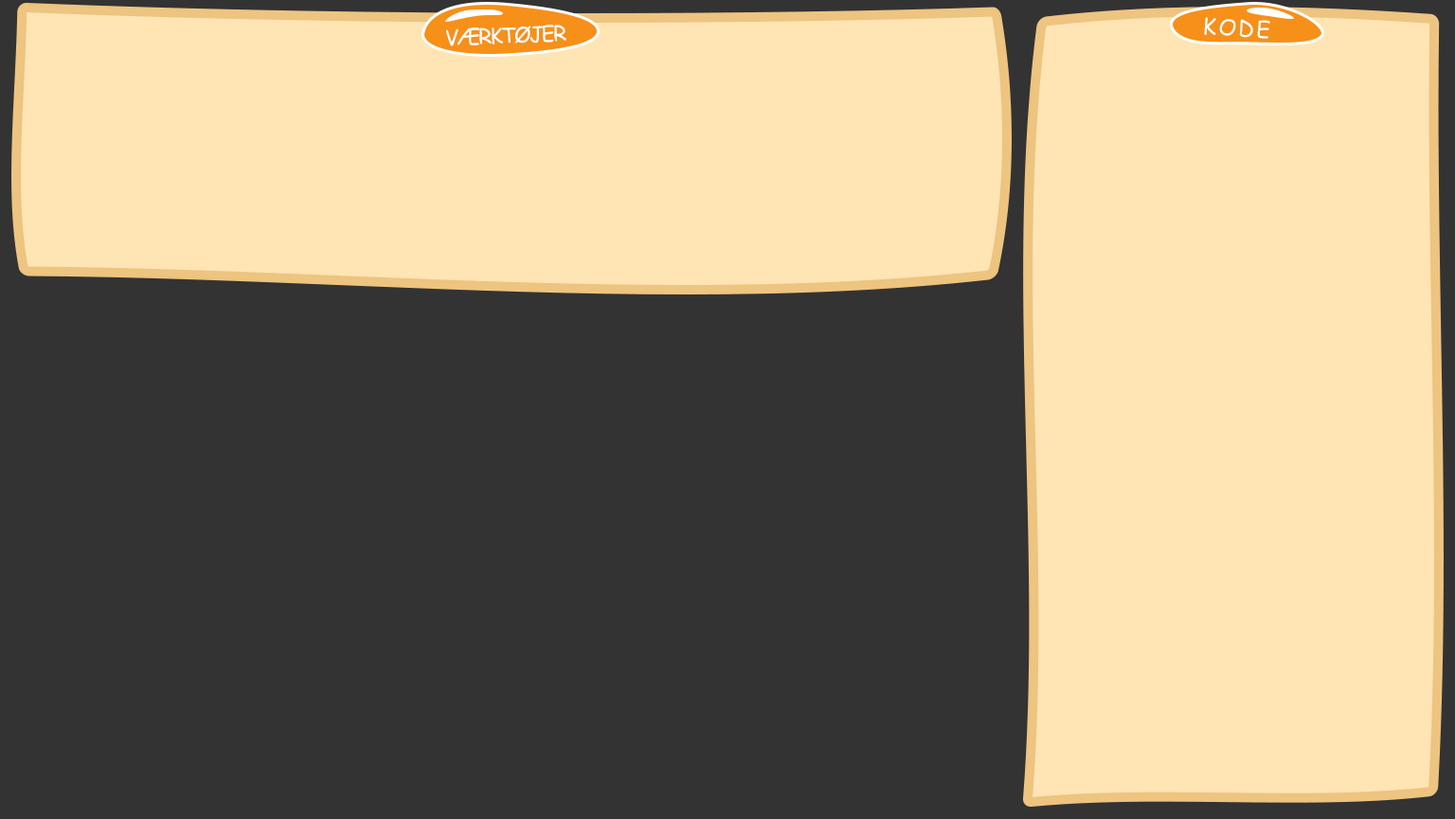
<style>
.page{position:relative;width:1455px;height:819px;background:#333333}
.page>*{position:absolute;margin:0}
.t1{font:21.8px "ComicSansMS";letter-spacing:0.1em;color:#ffffff}
.t2{font:20.8px "ComicSansMS";letter-spacing:-0.08em;color:#ffffff}
</style>
<div class="page">
<p class="t1" style="left:1204px;top:17px;width:66px;height:22px;rotate:4deg">KODE</p>
<p class="t2" style="left:446px;top:25px;width:121px;height:21px;rotate:-2deg">VÆRKTØJER</p>
</div>
